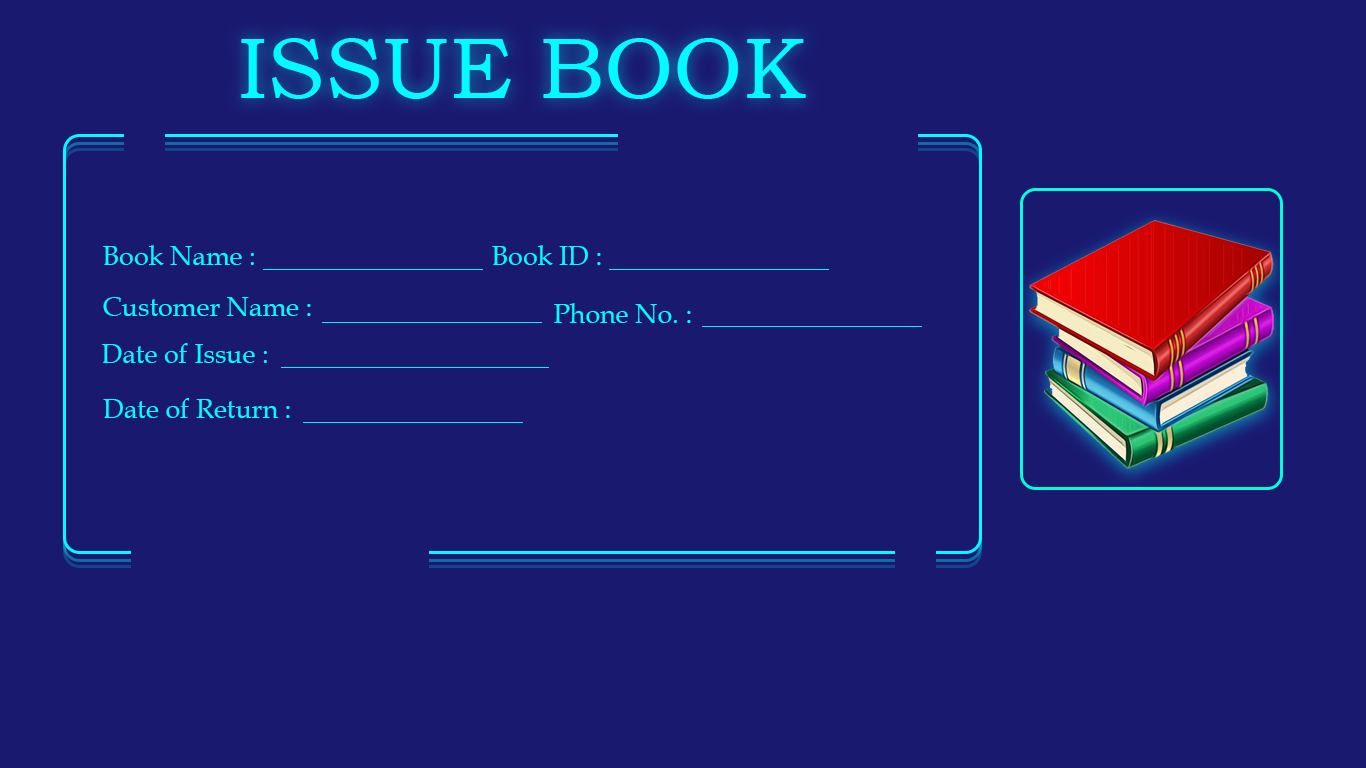
<style>
.page{position:relative;width:1366px;height:768px;background:#191970}
.page>*{position:absolute;margin:0}
.t1{font:86.7px "BookmanOldStyle";color:#00fcff}
.t2{font:26.9px "BookAntiqua";color:#00fcff}
</style>
<div class="page">
<p class="t1" style="left:241px;top:38px;width:565px;height:61px">ISSUE BOOK</p>
<p class="t2" style="left:103px;top:245px;width:151px;height:20px">Book Name :</p>
<p class="t2" style="left:492px;top:245px;width:109px;height:20px">Book ID :</p>
<p class="t2" style="left:103px;top:297px;width:208px;height:19px">Customer Name :</p>
<p class="t2" style="left:554px;top:303px;width:137px;height:20px">Phone No. :</p>
<p class="t2" style="left:102px;top:343px;width:165px;height:20px">Date of Issue :</p>
<p class="t2" style="left:103px;top:398px;width:187px;height:20px">Date of Return :</p>
</div>
